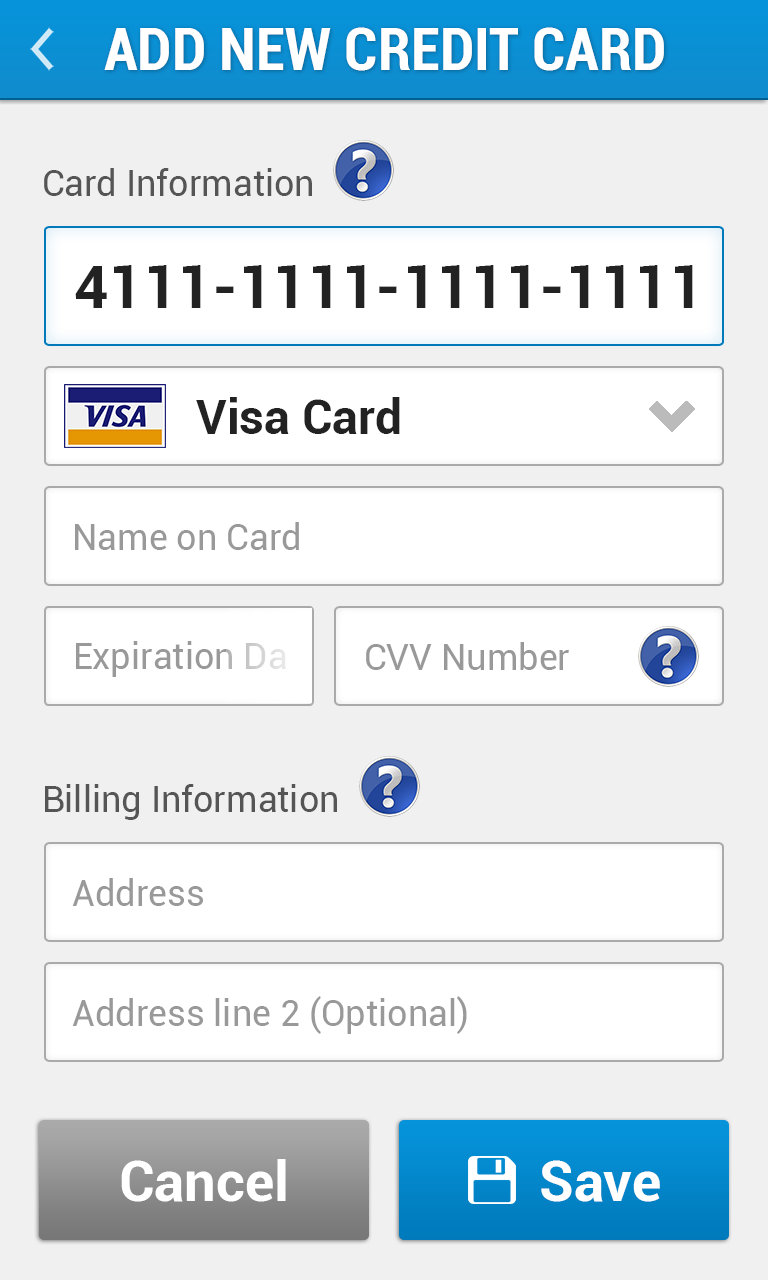
<style>
.page{position:relative;width:768px;height:1280px;background:#f0f0f0}
.page>*{position:absolute;margin:0}
.t1{font:60px "Roboto-BoldCondensed";color:#ffffff}
.t2{font:36px "Roboto-Regular";color:#555555}
.t3{font:60px "Roboto-Bold";color:#222222}
.t4{font:48px "Roboto-Bold";color:#222222}
.t5{font:36px "Roboto-Regular";color:#999999}
.t6{font:56px "Roboto-Bold";color:#ffffff}
</style>
<div class="page">
<p class="t1" style="left:104px;top:27px;width:560px;height:44px">ADD NEW CREDIT CARD</p>
<p class="t2" style="left:44px;top:168px;width:268px;height:28px">Card Information</p>
<p class="t3" style="left:75px;top:265px;width:618px;height:43px">4111-1111-1111-1111</p>
<p class="t4" style="left:196px;top:397px;width:204px;height:37px">Visa Card</p>
<p class="t5" style="left:75px;top:522px;width:224px;height:28px">Name on Card</p>
<p class="t5" style="left:76px;top:641px;width:210px;height:36px">Expiration Da</p>
<p class="t5" style="left:366px;top:642px;width:203px;height:28px">CVV Number</p>
<p class="t2" style="left:45px;top:784px;width:292px;height:36px">Billing Information</p>
<p class="t5" style="left:72px;top:878px;width:131px;height:28px">Address</p>
<p class="t5" style="left:72px;top:996px;width:395px;height:38px">Address line 2 (Optional)</p>
<p class="t6" style="left:121px;top:1159px;width:165px;height:43px">Cancel</p>
<p class="t6" style="left:541px;top:1160px;width:119px;height:42px">Save</p>
</div>
